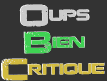
<style>
.page{position:relative;width:107px;height:81px;background:#333333}
.page>*{position:absolute;margin:0}
.t1{font:30.6px "JacintoSans";color:#cbcbcb}
.t2{font:30px "JacintoSans";color:#cbcbcb}
.t3{font:30.6px "JacintoSans";color:#3fd253}
.t4{font:30px "JacintoSans";color:#3fd253}
.t5{font:30.6px "JacintoSans";color:#d2bb3f}
.t6{font:30px "JacintoSans";color:#d2bb3f}
</style>
<div class="page">
<p class="t1" style="left:19px;top:4px;width:71px;height:23px;rotate:-1deg">Oups</p>
<p class="t2" style="left:20px;top:5px;width:69px;height:22px;rotate:-1deg">Oups</p>
<p class="t3" style="left:23px;top:31px;width:62px;height:23px;rotate:-1deg">Bien</p>
<p class="t4" style="left:24px;top:32px;width:61px;height:22px;rotate:-1deg">Bien</p>
<p class="t5" style="left:1px;top:58px;width:104px;height:23px;rotate:-1deg">Critique</p>
<p class="t6" style="left:2px;top:58px;width:102px;height:23px;rotate:-1deg">Critique</p>
</div>
